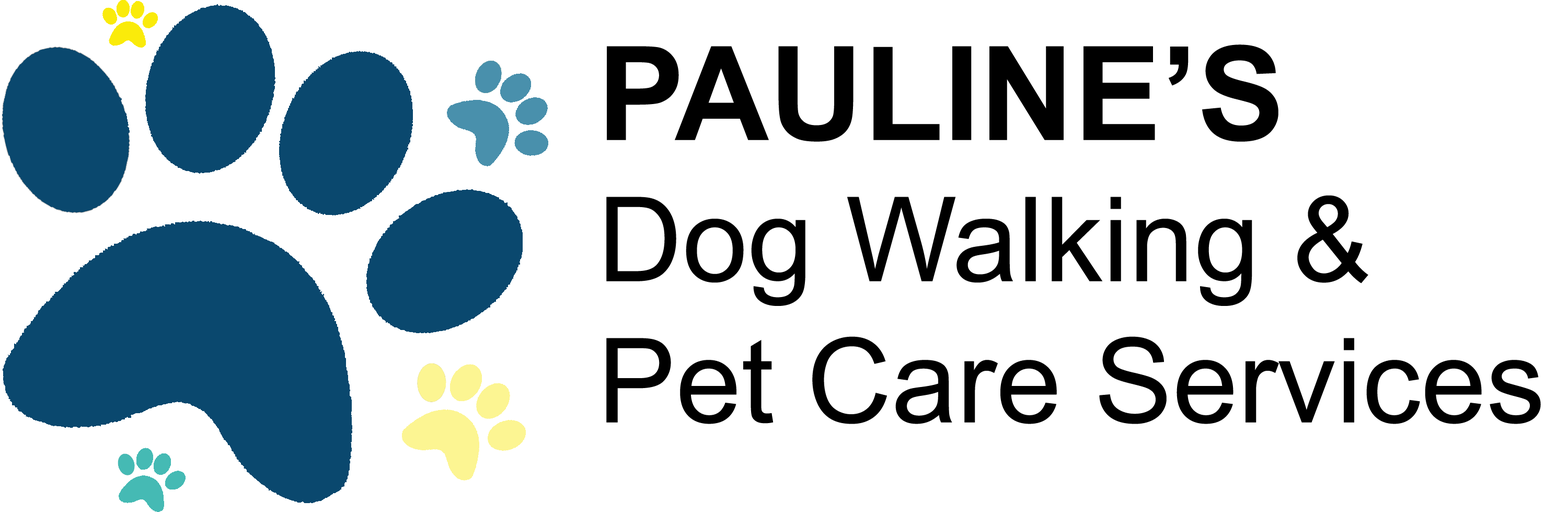
<style>
.page{position:relative;width:1568px;height:512px;background:#ffffff}
.page>*{position:absolute;margin:0}
.t1{font:117.6px "ArialMT";color:#000000}
.t2{font:130.7px "Arial-BoldMT";color:#000000}
</style>
<div class="page">
<p class="t1" style="left:606px;top:44px;width:935px;height:380px"><span class="t2">PAULINE’S <br></span>Dog Walking &amp; Pet Care Services</p>
</div>
